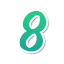
<style>
.page{position:relative;width:64px;height:64px;background:#ffffff}
.page>*{position:absolute;margin:0}
.t1{font:72px "MaroonedOnMarsBB";color:#1cbc90}
</style>
<div class="page">
<p class="t1" style="left:19px;top:11px;width:28px;height:41px">8</p>
</div>
